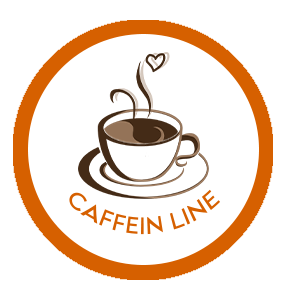
<style>
.page{position:relative;width:288px;height:300px;background:#ffffff}
.page>*{position:absolute;margin:0}
.t1{font:20.8px "LEMONMILK-Regular";color:#d66000;scale:0.93 1}
</style>
<div class="page">
<p class="t1" style="left:69px;top:189px;width:151px;height:46px;text-align:center">Caffein Line</p>
</div>
